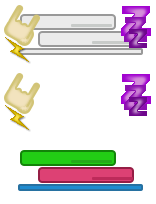
<style>
.page{position:relative;width:156px;height:204px;background:#ffffff}
.page>*{position:absolute;margin:0}
.t1{font:56.7px "Arial-Black"}
.t2{font:48.1px "Arial-Black"}
.t3{font:36.1px "Arial-Black"}
</style>
<div class="page">
<p class="t1" style="left:121px;top:6px;width:30px;height:30px">z</p>
<p class="t2" style="left:124px;top:17px;width:23px;height:25px">z</p>
<p class="t3" style="left:129px;top:29px;width:18px;height:19px">z</p>
<p class="t1" style="left:121px;top:74px;width:30px;height:30px">z</p>
<p class="t2" style="left:124px;top:85px;width:23px;height:25px">z</p>
<p class="t3" style="left:129px;top:97px;width:18px;height:19px">z</p>
</div>
